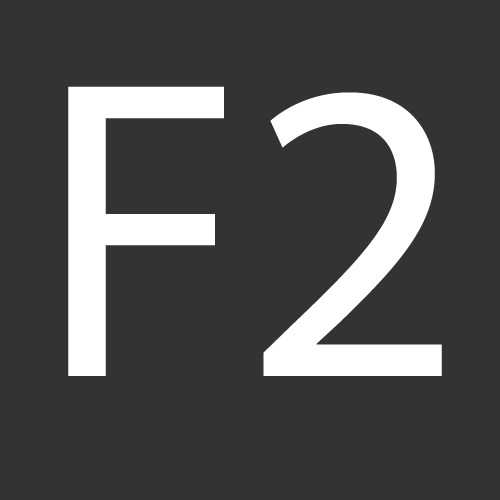
<style>
.page{position:relative;width:500px;height:500px;background:#333333}
.page>*{position:absolute;margin:0}
.t1{font:428.6px "MyriadPro-Regular";color:#ffffff}
</style>
<div class="page">
<p class="t1" style="left:68px;top:86px;width:374px;height:290px">F2</p>
</div>
